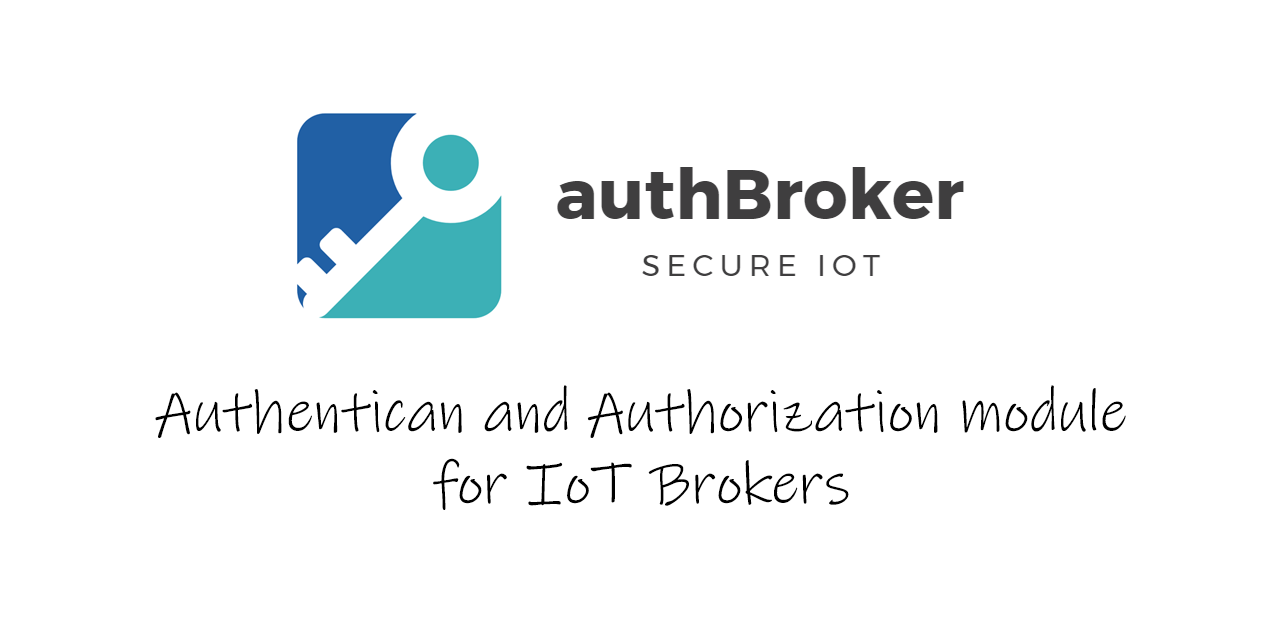
<style>
.page{position:relative;width:1280px;height:640px;background:#ffffff}
.page>*{position:absolute;margin:0}
.t1{font:60px "InkFree";color:#000000}
</style>
<div class="page">
<p class="t1" style="left:155px;top:385px;width:971px;height:125px;text-align:center">Authentican and Authorization module<br>for IoT Brokers</p>
</div>
